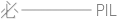
<style>
.page{position:relative;width:119px;height:19px;background:#ffffff}
.page>*{position:absolute;margin:0}
.t1{font:16px "NotoSansCJKkr-Thin";letter-spacing:-0.01em;color:#7f7f7f}
</style>
<div class="page">
<p class="t1" style="left:97px;top:4px;width:20px;height:12px">PIL</p>
</div>
